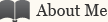
<style>
.page{position:relative;width:108px;height:22px;background:#fdfaf2}
.page>*{position:absolute;margin:0}
.t1{font:17.3px "Georgia";color:#333333;scale:0.94 1}
</style>
<div class="page">
<p class="t1" style="left:36px;top:3px;width:71px;height:13px">About Me</p>
</div>
